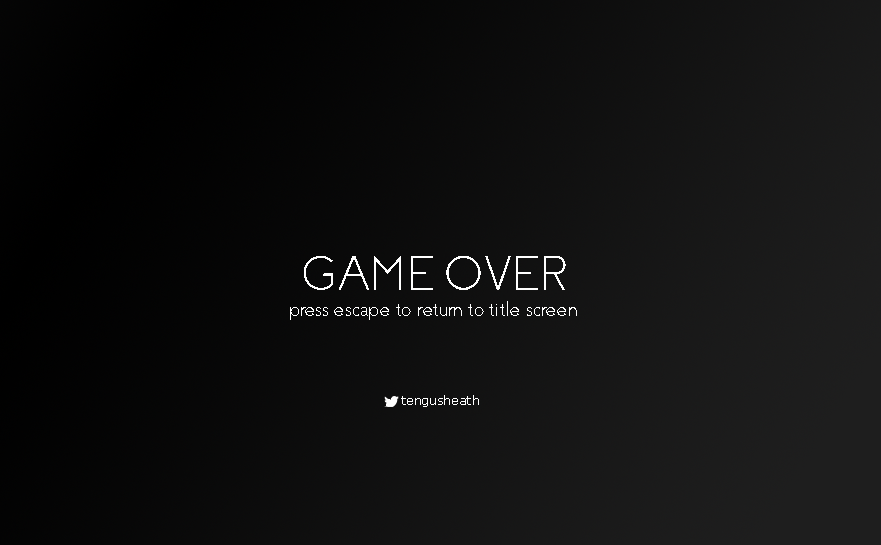
<style>
.page{position:relative;width:881px;height:545px}
.page>*{position:absolute;margin:0}
.t1{font:48.9px "Coves-Light";color:#ffffff}
.t2{font:21.2px "Coves-Light";color:#ffffff}
.t3{font:12.1px "Verdana";color:#ffffff}
</style>
<div class="page">
<p class="t1" style="left:304px;top:256px;width:262px;height:34px">GAME OVER</p>
<p class="t2" style="left:290px;top:301px;width:287px;height:19px">press escape to return to title screen</p>
<p class="t3" style="left:401px;top:395px;width:78px;height:12px">tengusheath</p>
</div>
